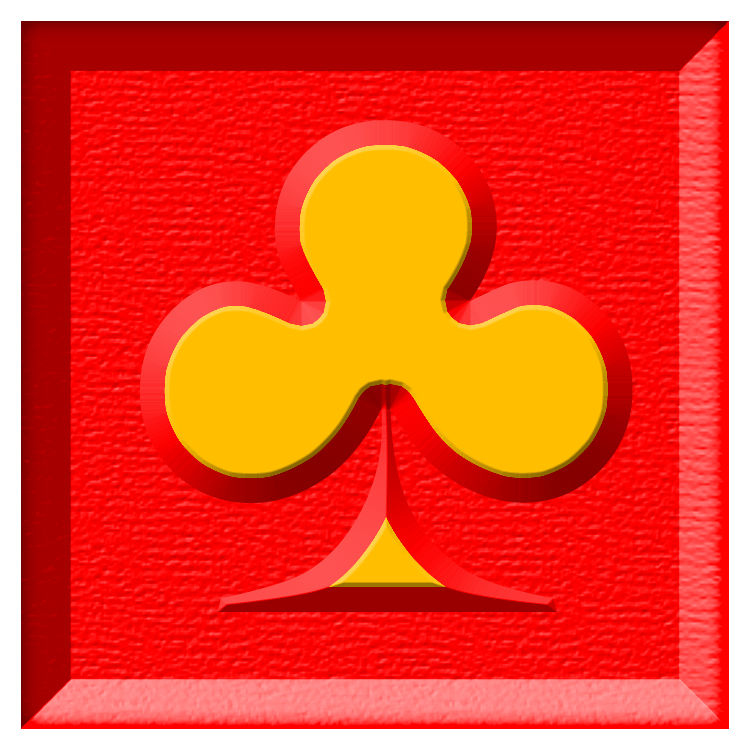
<style>
.page{position:relative;width:750px;height:750px}
.page>*{position:absolute;margin:0}
.t1{font:817.9px "ArialMT"}
</style>
<div class="page">
<p class="t1" style="left:139px;top:120px;width:494px;height:492px">♣</p>
</div>
